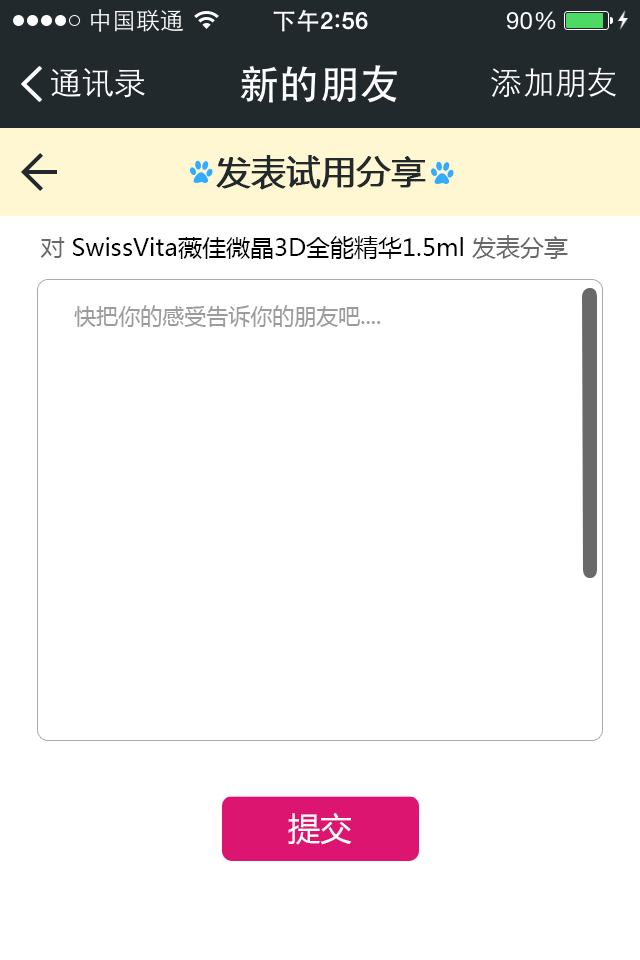
<style>
.page{position:relative;width:640px;height:960px;background:#ffffff}
.page>*{position:absolute;margin:0}
.t1{font:34px "MicrosoftYaHei";color:#22292c;font-weight:bold}
.t2{font:24px "MicrosoftYaHei";color:#000000}
.t3{font:24px "MicrosoftYaHei";color:#696969}
.t4{font:22px "MicrosoftYaHei";color:#9c9c9c}
.t5{font:32.4px "MicrosoftYaHei";color:#ffffff}
</style>
<div class="page">
<p class="t1" style="left:216px;top:155px;width:210px;height:35px">发表试用分享</p>
<p class="t2" style="left:40px;top:235px;width:528px;height:24px"><span class="t3">对 </span>SwissVita薇佳微晶3D全能精华1.5ml <span class="t3">发表分享</span></p>
<p class="t4" style="left:74px;top:305px;width:307px;height:22px">快把你的感受告诉你的朋友吧....</p>
<p class="t5" style="left:288px;top:813px;width:64px;height:32px">提交</p>
</div>
